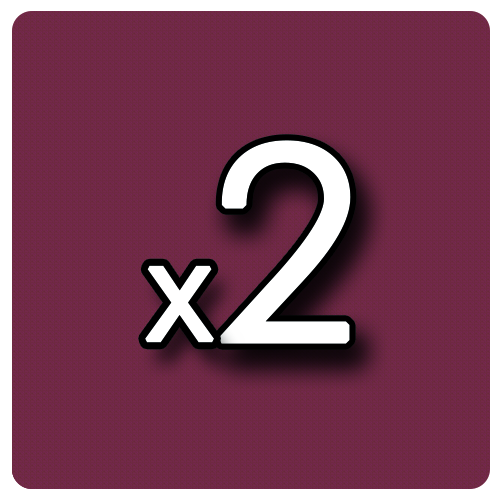
<style>
.page{position:relative;width:500px;height:500px}
.page>*{position:absolute;margin:0}
.t1{font:270.8px "FuturaBT-Light";letter-spacing:-0.09em;color:#ffffff;font-weight:bold}
.t2{font:166.7px "FuturaBT-Light";letter-spacing:-0.09em;color:#ffffff;font-weight:bold}
</style>
<div class="page">
<p class="t1" style="left:218px;top:140px;width:133px;height:204px">2</p>
<p class="t2" style="left:145px;top:265px;width:69px;height:78px">x</p>
</div>
